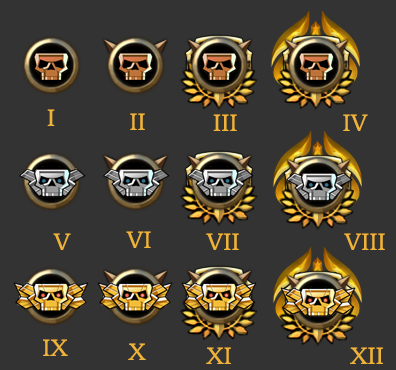
<style>
.page{position:relative;width:396px;height:370px;background:#333333}
.page>*{position:absolute;margin:0}
.t1{font:24px "BookmanOldStyle";color:#eeb338}
</style>
<div class="page">
<p class="t1" style="left:47px;top:109px;width:8px;height:17px">I</p>
<p class="t1" style="left:130px;top:113px;width:15px;height:17px">II</p>
<p class="t1" style="left:213px;top:114px;width:24px;height:17px">III</p>
<p class="t1" style="left:343px;top:114px;width:25px;height:17px">IV</p>
<p class="t1" style="left:53px;top:233px;width:18px;height:17px">V</p>
<p class="t1" style="left:126px;top:231px;width:25px;height:17px">VI</p>
<p class="t1" style="left:206px;top:233px;width:33px;height:17px">VII</p>
<p class="t1" style="left:344px;top:233px;width:41px;height:17px">VIII</p>
<p class="t1" style="left:43px;top:339px;width:25px;height:17px">IX</p>
<p class="t1" style="left:128px;top:343px;width:18px;height:17px">X</p>
<p class="t1" style="left:206px;top:347px;width:25px;height:17px">XI</p>
<p class="t1" style="left:350px;top:347px;width:33px;height:17px">XII</p>
</div>
